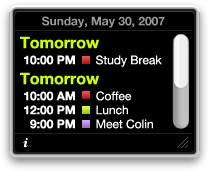
<style>
.page{position:relative;width:209px;height:171px;background:#000000}
.page>*{position:absolute;margin:0}
.t1{font:12px "HelveticaNeue-Bold";color:#999999}
.t2{font:12px/14px "HelveticaNeue";color:#ffffff}
.t3{font:16px/12px "HelveticaNeue-Bold";color:#ccff00}
.t4{font:12px/14px "HelveticaNeue-Bold";color:#ffffff}
.t5{font:12px/14px "HelveticaNeue-Bold";color:#000000}
</style>
<div class="page">
<p class="t1" style="left:42px;top:16px;width:123px;height:12px">Sunday, May 30, 2007</p>
<p class="t2" style="left:20px;top:36px;width:142px;height:93px"><span class="t3">Tomorrow<br></span><span class="t4"> 10:00 PM      </span>Study Break<br><span class="t3">Tomorrow<br></span><span class="t4"> 10:00 AM      </span>Coffee<br><span class="t4"> 12:00 PM      </span>Lunch<br> <span class="t5">0</span><span class="t4">9:00 PM      </span>Meet Colin</p>
</div>
